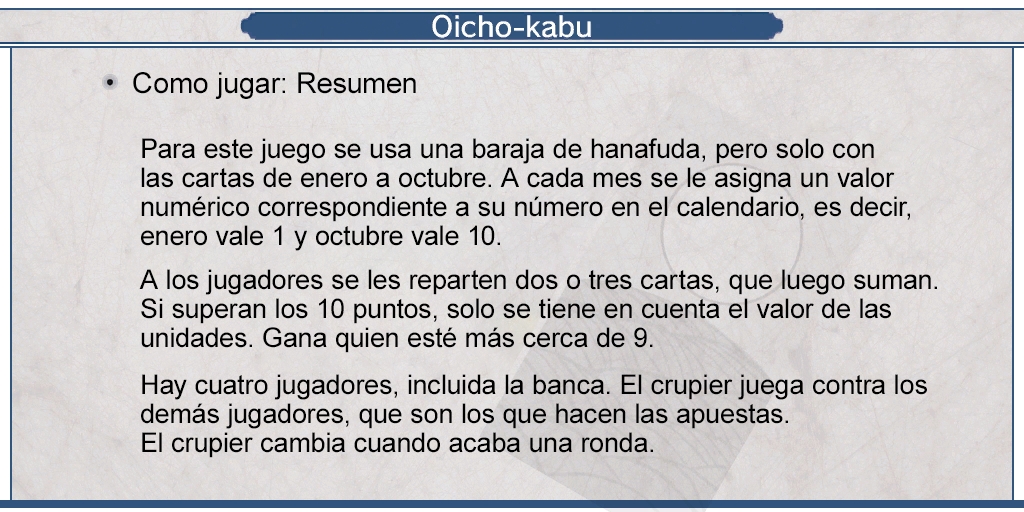
<style>
.page{position:relative;width:1024px;height:512px}
.page>*{position:absolute;margin:0}
.t1{font:29px "ArialMT";color:#000000}
.t2{font:27px/29px "ArialMT";color:#000000}
</style>
<div class="page">
<p class="t1" style="left:133px;top:72px;width:283px;height:27px">Como jugar: Resumen</p>
<p class="t2" style="left:139px;top:138px;width:798px;height:320px">Para este juego se usa una baraja de hanafuda, pero solo con <br>las cartas de enero a octubre. A cada mes se le asigna un valor <br>numérico correspondiente a su número en el calendario, es decir, <br>enero vale 1 y octubre vale 10.<br><br>A los jugadores se les reparten dos o tres cartas, que luego suman. <br>Si superan los 10 puntos, solo se tiene en cuenta el valor de las <br>unidades. Gana quien esté más cerca de 9.<br><br>Hay cuatro jugadores, incluida la banca. El crupier juega contra los<br>demás jugadores, que son los que hacen las apuestas.<br>El crupier cambia cuando acaba una ronda.</p>
</div>
